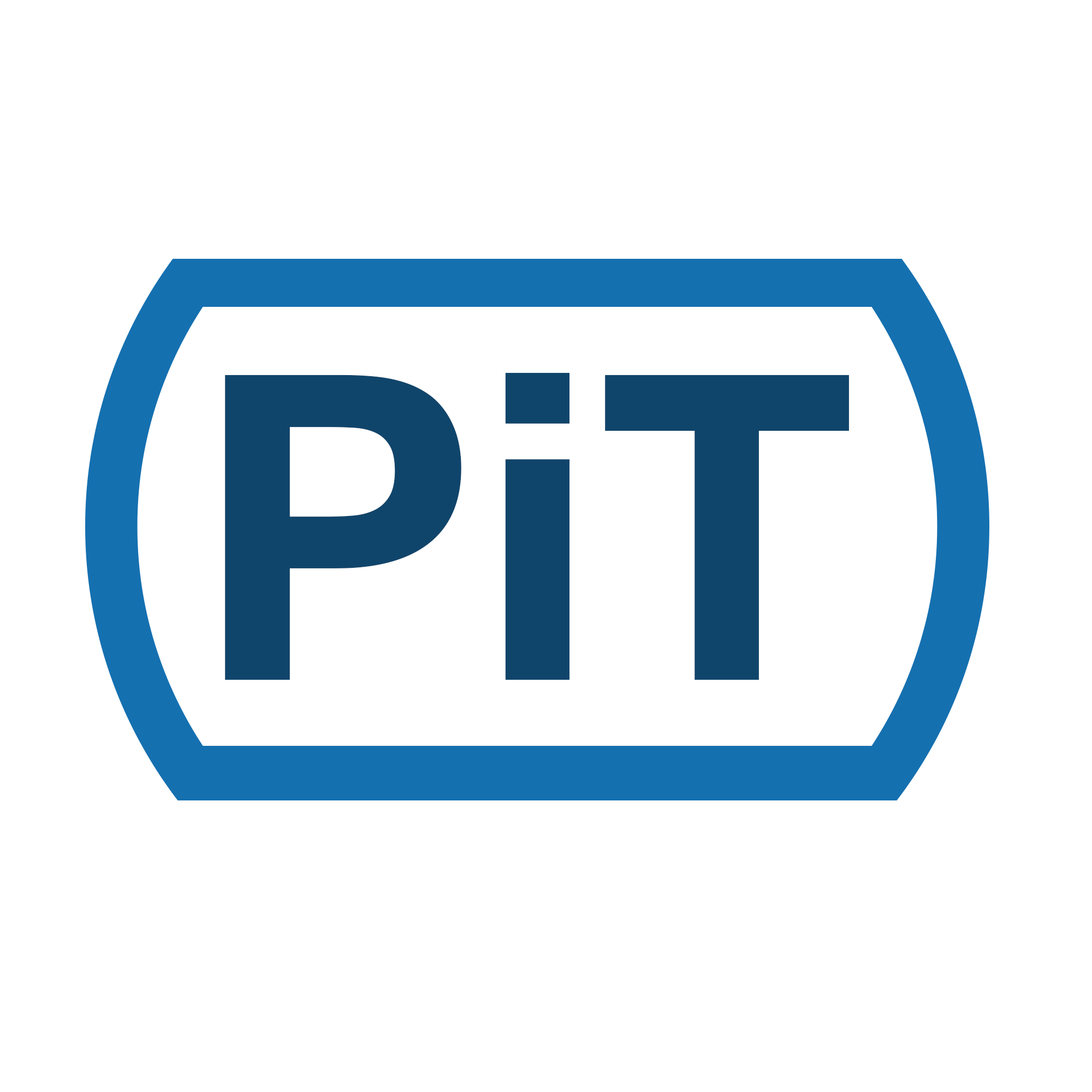
<style>
.page{position:relative;width:1092px;height:1092px;background:#ffffff}
.page>*{position:absolute;margin:0}
.t1{font:546px "Tunga-Bold";color:#10456b}
</style>
<div class="page">
<p class="t1" style="left:225px;top:372px;width:624px;height:308px">PiT</p>
</div>
